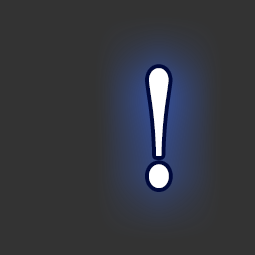
<style>
.page{position:relative;width:255px;height:255px;background:#333333}
.page>*{position:absolute;margin:0}
.t1{font:156px "RyuminPro-ExBold";letter-spacing:-0.08em;color:#ffffff;scale:0.83 1}
</style>
<div class="page">
<p class="t1" style="left:149px;top:68px;width:20px;height:120px">!</p>
</div>
